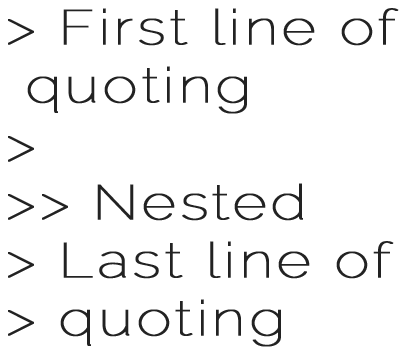
<style>
.page{position:relative;width:400px;height:356px;background:#ffffff}
.page>*{position:absolute;margin:0}
.t1{font:48.6px "Raleway-Thin";letter-spacing:0.05em;color:#222222;font-weight:bold;scale:1.2 1}
</style>
<div class="page">
<p class="t1" style="left:8px;top:8px;width:391px;height:339px">&gt; First line of<br> quoting<br>&gt;<br>&gt;&gt; Nested<br>&gt; Last line of<br>&gt; quoting</p>
</div>
